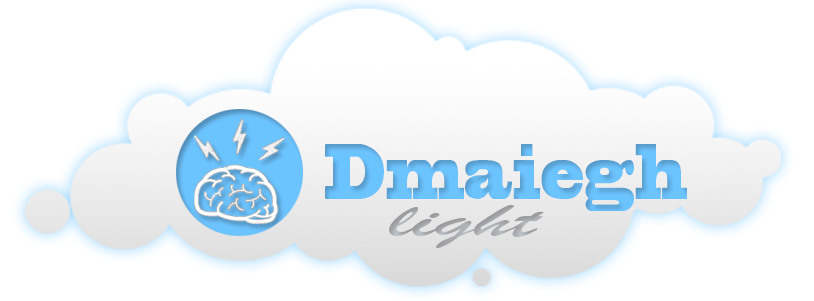
<style>
.page{position:relative;width:814px;height:301px;background:#ffffff}
.page>*{position:absolute;margin:0}
.t1{font:72.8px "BlackoakStd";color:#6ac0fa;scale:0.46 1}
.t2{font:48.6px "BrushScriptMT";color:#a4a7aa;scale:2.07 1}
</style>
<div class="page">
<p class="t1" style="left:325px;top:144px;width:362px;height:67px">Dmaiegh</p>
<p class="t2" style="left:389px;top:205px;width:155px;height:43px">light</p>
</div>
